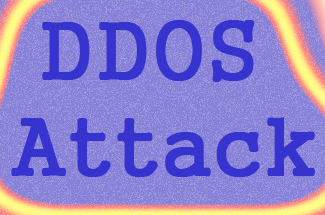
<style>
.page{position:relative;width:325px;height:215px;background:#857fd7}
.page>*{position:absolute;margin:0}
.t1{font:80px "Gungsuh";color:#3733ce;font-weight:bold}
</style>
<div class="page">
<p class="t1" style="left:11px;top:20px;width:304px;height:157px">DDOS<br>Attack</p>
</div>
